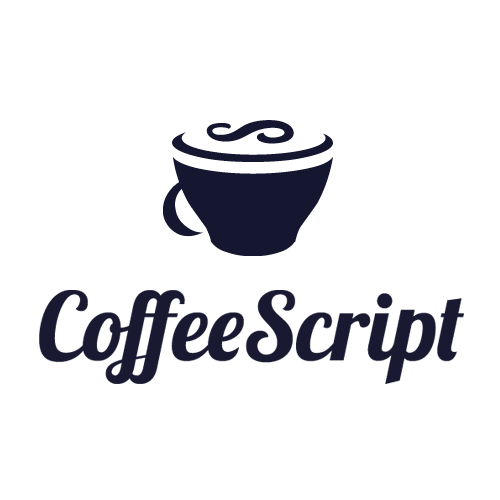
<style>
.page{position:relative;width:500px;height:500px;background:#ffffff}
.page>*{position:absolute;margin:0}
.t1{font:94.1px "Lobster1.4";color:#191932}
</style>
<div class="page">
<p class="t1" style="left:39px;top:290px;width:425px;height:94px">CoffeeScript</p>
</div>
